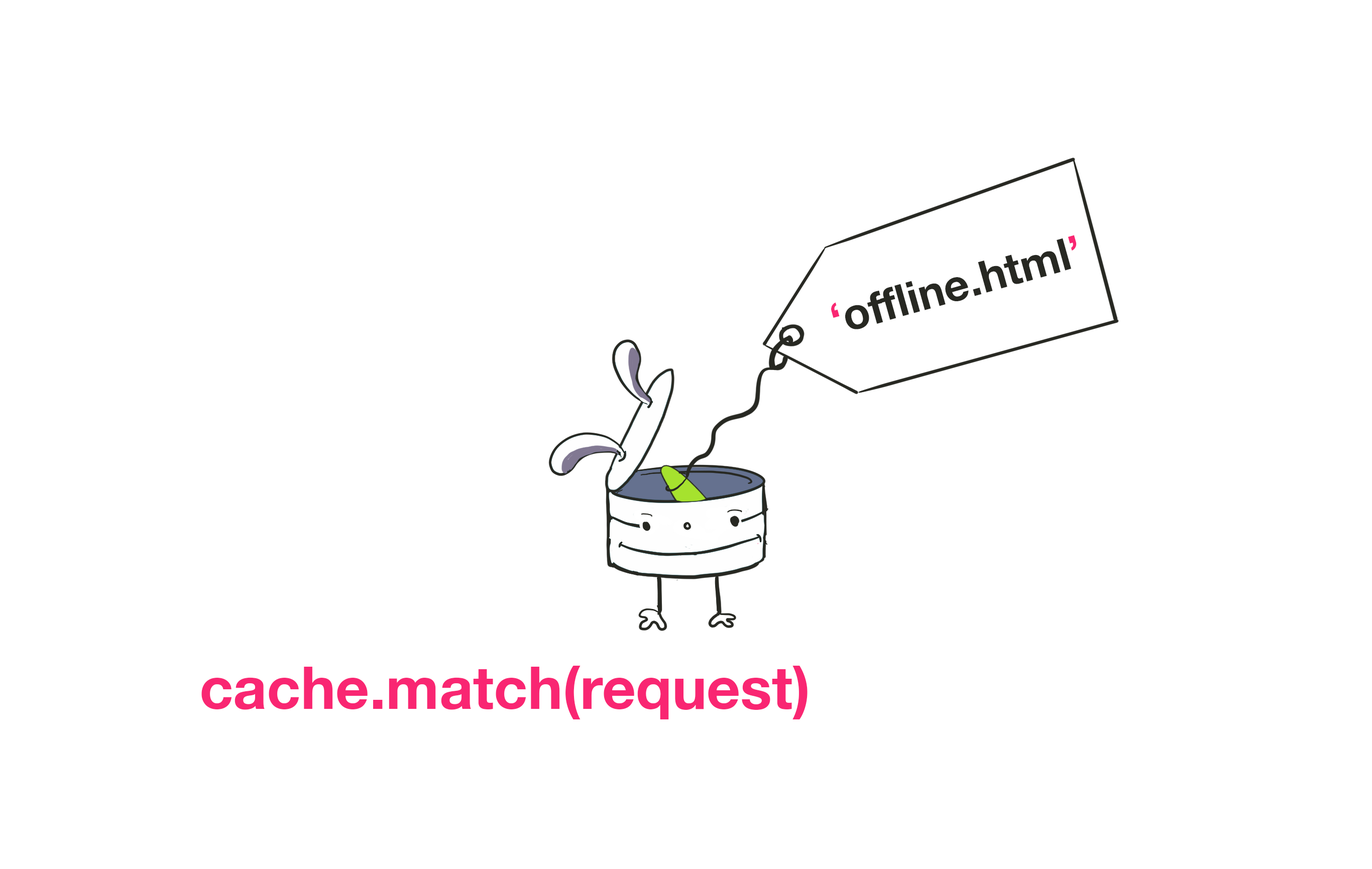
<style>
.page{position:relative;width:1372px;height:869px;background:#ffffff}
.page>*{position:absolute;margin:0}
.t1{font:44.2px "HelveticaNeue-Bold";color:#272822}
.t2{font:44.2px "HelveticaNeue-Bold";color:#f92672}
.t3{font:58.9px "HelveticaNeue-Bold";color:#f92672}
</style>
<div class="page">
<p class="t1" style="left:831px;top:235px;width:245px;height:94px;rotate:-16deg"><span class="t2">‘</span>offline.html<span class="t2">’</span></p>
<p class="t3" style="left:201px;top:666px;width:606px;height:54px">cache.match(request)</p>
</div>
